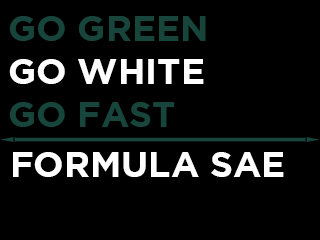
<style>
.page{position:relative;width:320px;height:240px;background:#000000}
.page>*{position:absolute;margin:0}
.t1{font:36px "Gotham-Bold";color:#18453b}
.t2{font:36px "Gotham-Bold";color:#ffffff}
</style>
<div class="page">
<p class="t1" style="left:9px;top:16px;width:197px;height:111px;text-align:right">GO GREEN<br><span class="t2">GO WHITE<br></span>GO FAST</p>
<p class="t2" style="left:13px;top:152px;width:271px;height:25px">FORMULA SAE</p>
</div>
